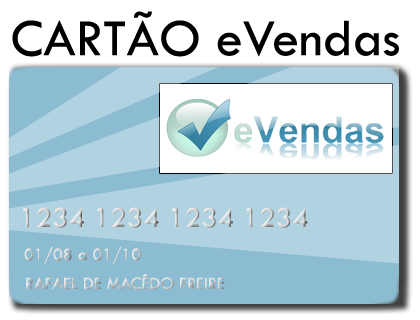
<style>
.page{position:relative;width:420px;height:320px;background:#ffffff}
.page>*{position:absolute;margin:0}
.t1{font:54px "TwCenMT-Regular";color:#000000}
.t2{font:30px "TwCenMT-Regular"}
.t3{font:18px "TwCenMT-Regular"}
</style>
<div class="page">
<p class="t1" style="left:12px;top:11px;width:387px;height:46px">CARTÃO eVendas</p>
<p class="t2" style="left:22px;top:207px;width:286px;height:21px">1234 1234 1234 1234</p>
<p class="t3" style="left:24px;top:246px;width:117px;height:18px">01/08 a 01/10</p>
<p class="t3" style="left:26px;top:274px;width:199px;height:16px">RAFAEL DE MACÊDO FREIRE</p>
</div>
